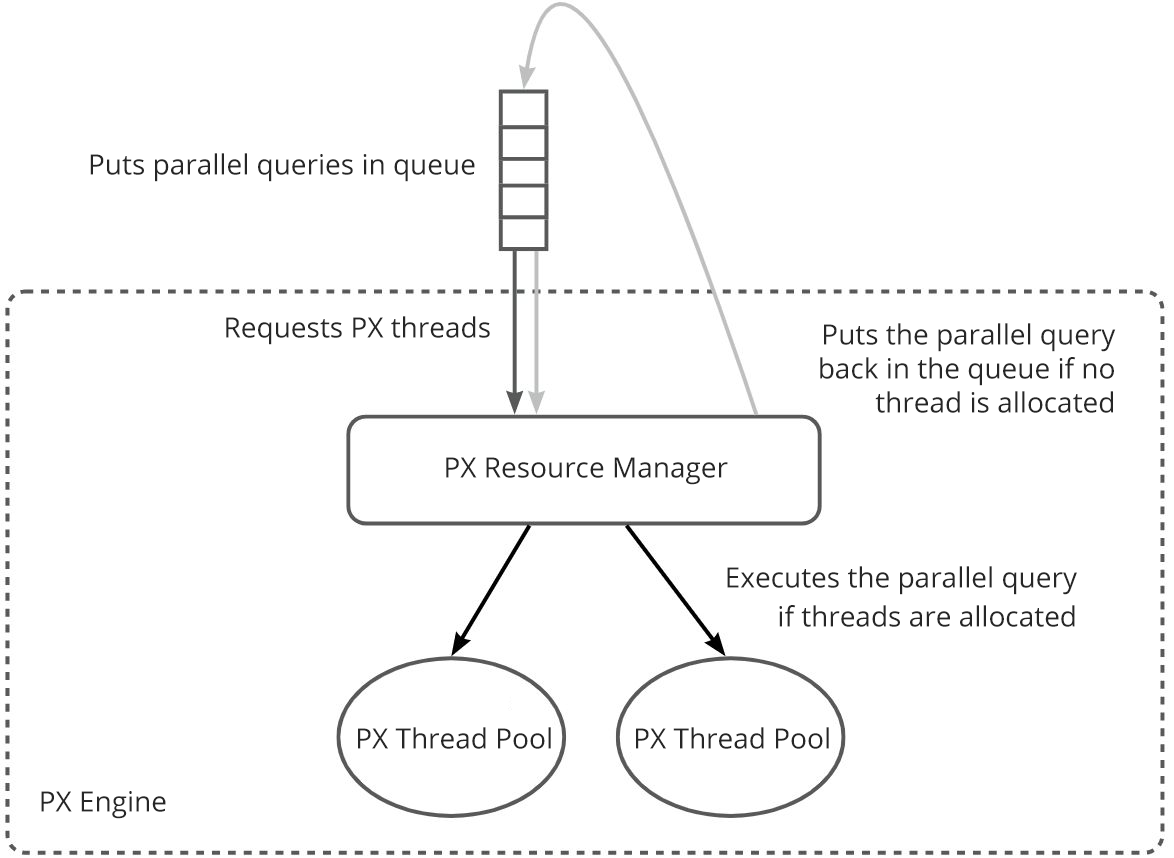
<style>
.page{position:relative;width:1174px;height:858px;background:#ffffff}
.page>*{position:absolute;margin:0}
.t1{font:28px "OpenSans";color:#262626}
.t2{font:28px/34px "OpenSans";color:#262626}
</style>
<div class="page">
<p class="t1" style="left:90px;top:153px;width:385px;height:29px">Puts parallel queries in queue</p>
<p class="t1" style="left:226px;top:316px;width:264px;height:29px">Requests PX threads</p>
<p class="t2" style="left:820px;top:323px;width:296px;height:90px;text-align:right">Puts the parallel query back in the queue if no thread is allocated</p>
<p class="t1" style="left:446px;top:457px;width:282px;height:28px">PX Resource Manager</p>
<p class="t2" style="left:727px;top:566px;width:350px;height:61px;text-align:right">Executes the parallel query<br> if threads are allocated</p>
<p class="t1" style="left:358px;top:727px;width:193px;height:22px">PX Thread Pool</p>
<p class="t1" style="left:636px;top:727px;width:193px;height:22px">PX Thread Pool</p>
<p class="t1" style="left:41px;top:791px;width:125px;height:28px">PX Engine</p>
</div>
